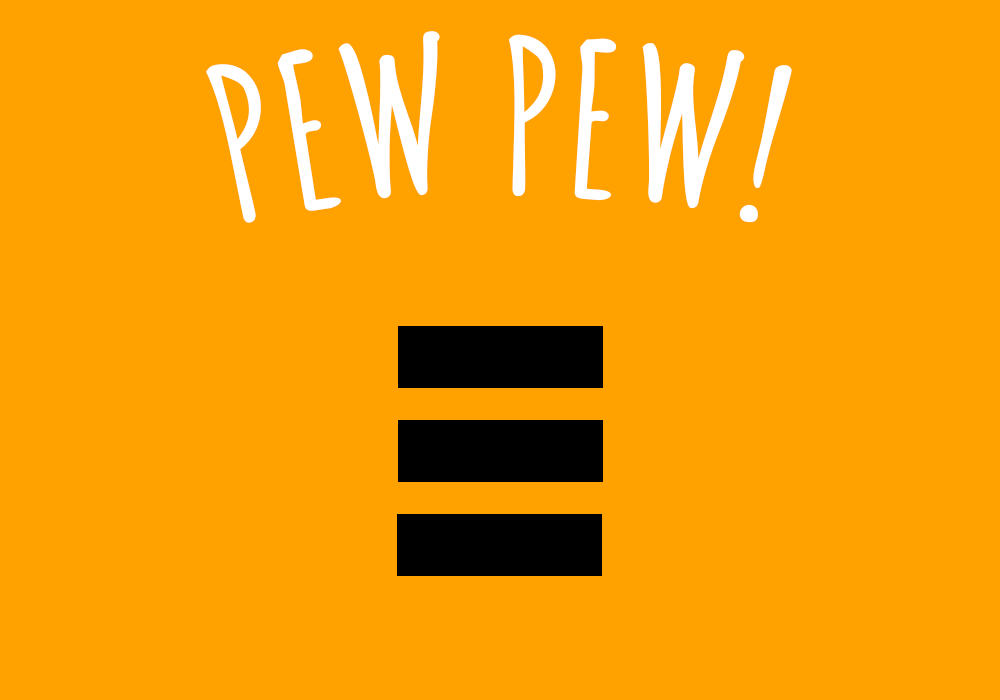
<style>
.page{position:relative;width:1000px;height:700px;background:#ffa200}
.page>*{position:absolute;margin:0}
.t1{font:205.9px "AmaticSC-Bold";color:#ffffff}
</style>
<div class="page">
<p class="t1" style="left:206px;top:31px;width:586px;height:192px">PEW PEW!</p>
</div>
